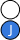
<style>
.page{position:relative;width:20px;height:40px;background:#ffffff}
.page>*{position:absolute;margin:0}
.t1{font:13px "OpenSans";color:#ffffff}
</style>
<div class="page">
<p class="t1" style="left:8px;top:25px;width:4px;height:11px">J</p>
</div>
